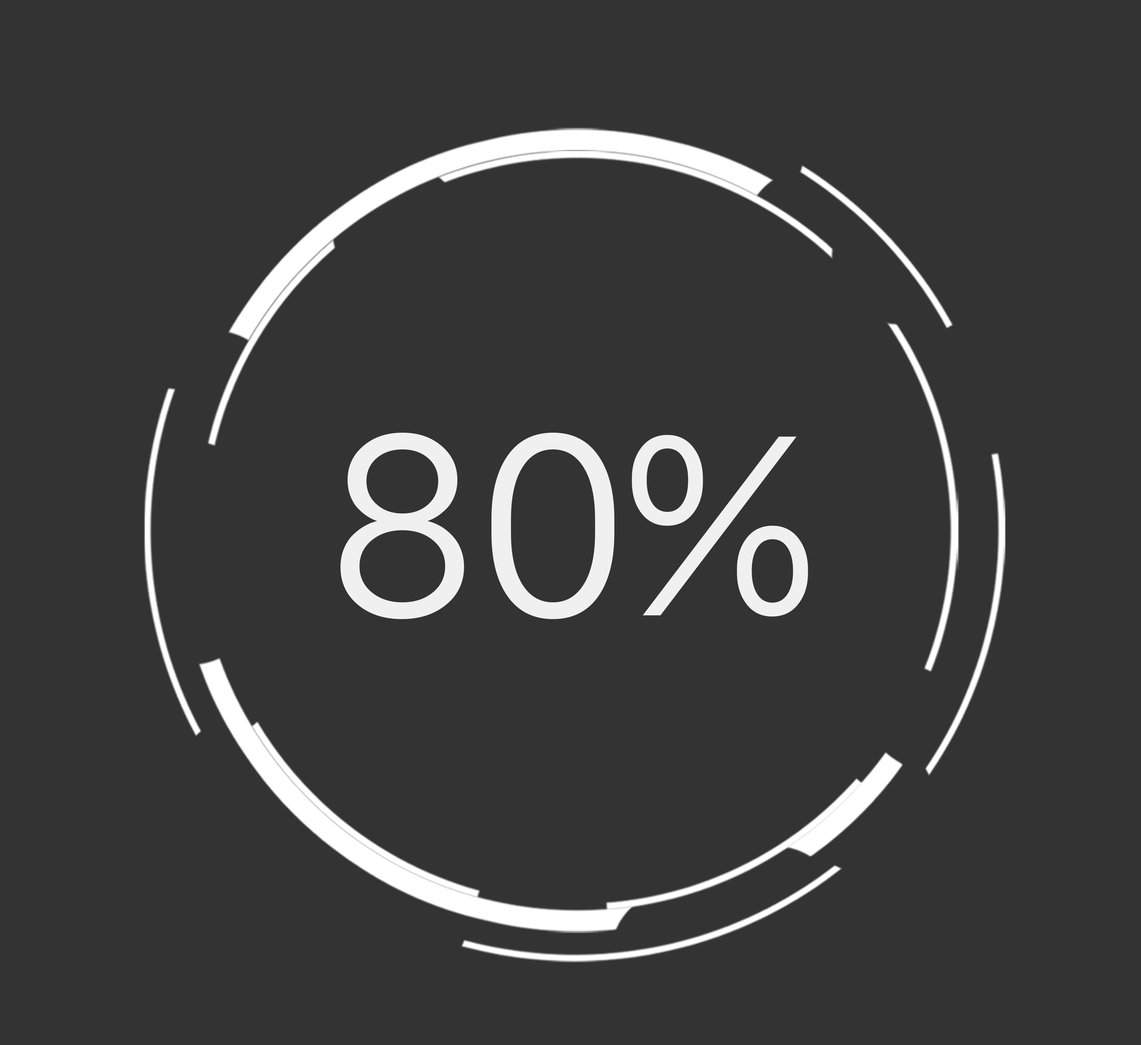
<style>
.page{position:relative;width:1141px;height:1045px;background:#333333}
.page>*{position:absolute;margin:0}
.t1{font:268.3px "SanFranciscoDisplay-Regular";color:#f0f0f0;text-transform:uppercase}
</style>
<div class="page">
<p class="t1" style="left:340px;top:433px;width:468px;height:186px">80%</p>
</div>
